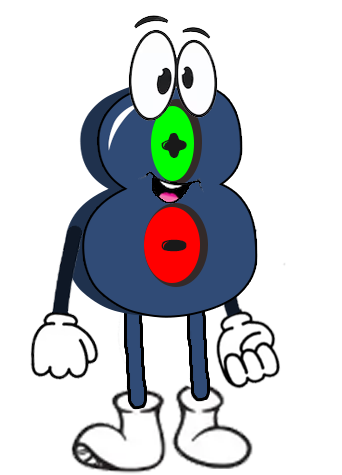
<style>
.page{position:relative;width:342px;height:475px;background:#ffffff}
.page>*{position:absolute;margin:0}
.t1{font:72px "RubberDuckRegular";letter-spacing:-0.01em;color:#191919}
</style>
<div class="page">
<p class="t1" style="left:161px;top:133px;width:26px;height:25px">+</p>
<p class="t1" style="left:161px;top:239px;width:26px;height:13px">-</p>
</div>
